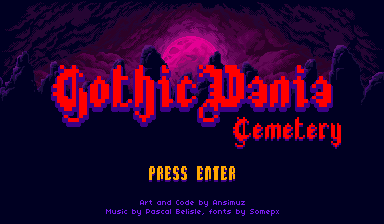
<style>
.page{position:relative;width:384px;height:224px;background:#000022}
.page>*{position:absolute;margin:0}
.t1{font:24.2px "Phantex";color:#ffa800}
.t2{font:8.1px "04b03";color:#7c1ef2}
</style>
<div class="page">
<p class="t1" style="left:149px;top:168px;width:86px;height:14px">PRESS ENTER</p>
<p class="t1" style="left:149px;top:166px;width:86px;height:14px">PRESS ENTER</p>
<p class="t2" style="left:106px;top:200px;width:173px;height:16px;text-align:center">Art and Code by Ansimuz<br>Music by Pascal Belisle, fonts by Somepx</p>
</div>
